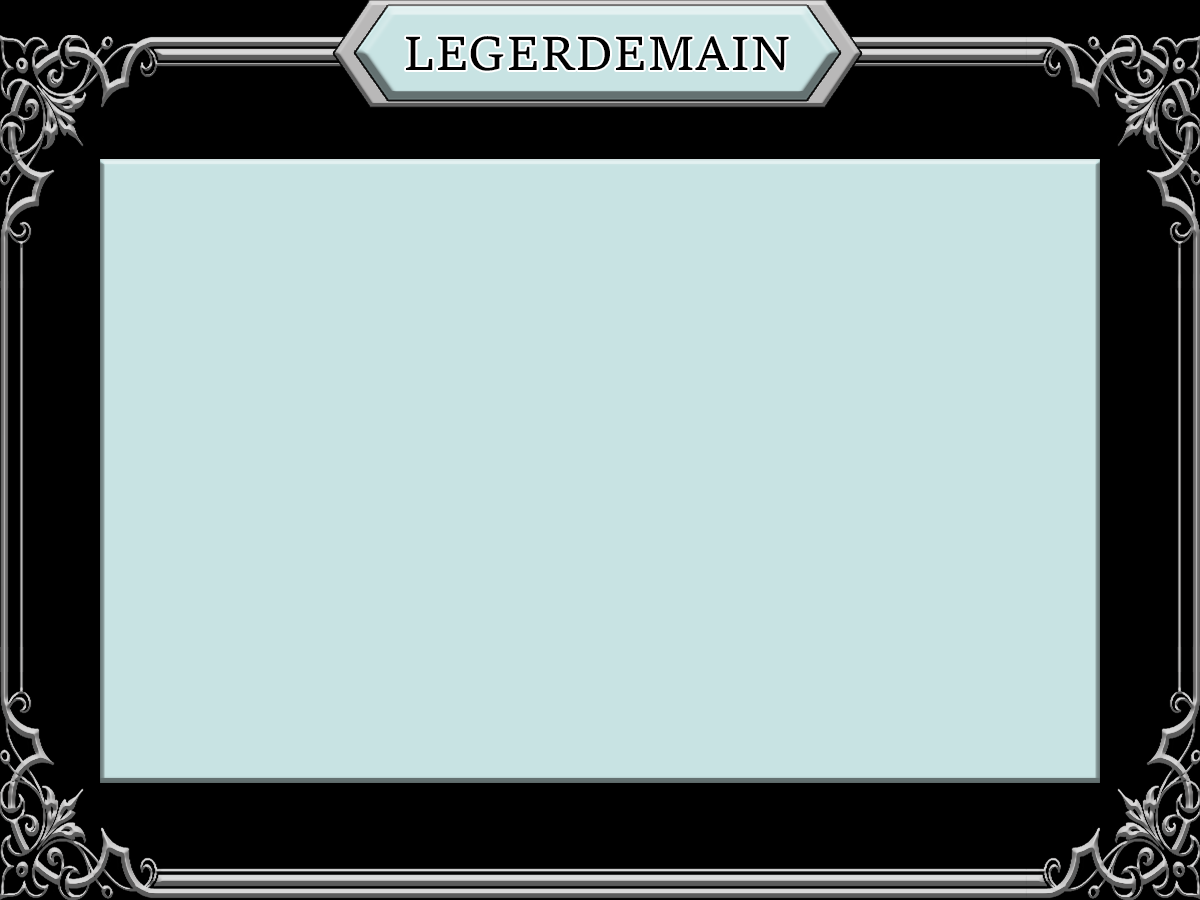
<style>
.page{position:relative;width:1200px;height:900px;background:#c8e3e3}
.page>*{position:absolute;margin:0}
.t1{font:50.3px "Sitka-Small";color:#010101}
</style>
<div class="page">
<p class="t1" style="left:406px;top:36px;width:383px;height:35px">LEGERDEMAIN</p>
</div>
